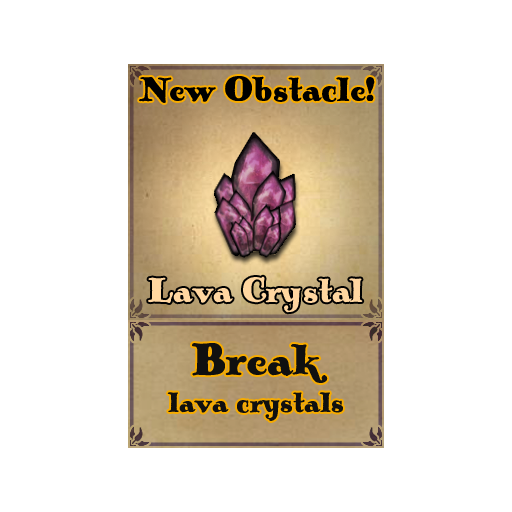
<style>
.page{position:relative;width:512px;height:512px;background:#ffffff}
.page>*{position:absolute;margin:0}
.t1{font:36px "PickworthOldStylePro";color:#000000}
.t2{font:36px "PickworthOldStylePro";color:#ffd6a0}
.t3{font:30px "PickworthOldStylePro";color:#101010}
.t4{font:48px "PickworthOldStylePro";color:#101010}
</style>
<div class="page">
<p class="t1" style="left:139px;top:76px;width:236px;height:27px">New Obstacle!</p>
<p class="t2" style="left:148px;top:276px;width:215px;height:37px">Lava Crystal</p>
<p class="t3" style="left:167px;top:343px;width:176px;height:78px;text-align:center"><span class="t4">Break <br></span>lava crystals</p>
</div>
